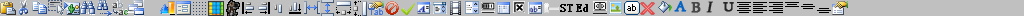
<style>
.page{position:relative;width:1024px;height:16px;background:#c0c0c0}
.page>*{position:absolute;margin:0}
.t1{font:22px "ArabicTypesetting";color:#0864c0;font-weight:bold}
.t2{font:22px "ArabicTypesetting";color:#484848;font-weight:bold}
.t3{font:22px "ArabicTypesetting";color:#252525;font-weight:bold;font-style:italic}
.t4{font:20px "ArabicTypesetting";color:#252525;font-weight:bold;text-decoration:underline}
</style>
<div class="page">
<p class="t1" style="left:674px;top:1px;width:13px;height:11px">A</p>
<p class="t2" style="left:691px;top:2px;width:10px;height:11px">B</p>
<p class="t3" style="left:706px;top:1px;width:7px;height:12px">I</p>
<p class="t4" style="left:723px;top:2px;width:11px;height:15px">U</p>
</div>
